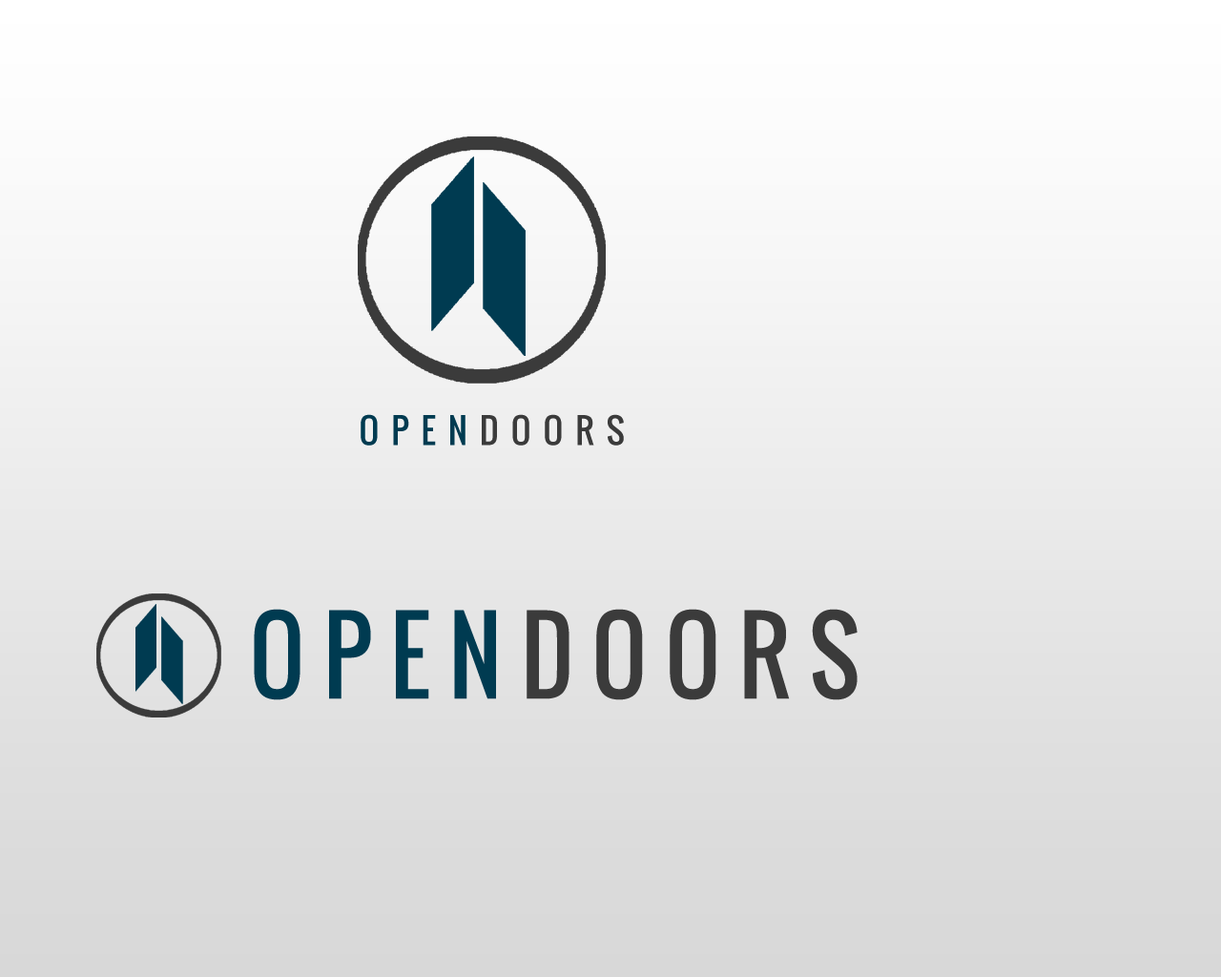
<style>
.page{position:relative;width:1221px;height:977px}
.page>*{position:absolute;margin:0}
.t1{font:34.3px "Oswald-Regular";letter-spacing:0.36em;color:#3b3b3b}
.t2{font:34.3px "Oswald-Regular";letter-spacing:0.36em;color:#003b51}
.t3{font:100.9px "Oswald-Regular";letter-spacing:0.2em;color:#3b3b3b;scale:0.94 1}
.t4{font:100.9px "Oswald-Regular";letter-spacing:0.2em;color:#003b51;scale:0.94 1}
</style>
<div class="page">
<p class="t1" style="left:361px;top:414px;width:263px;height:31px"><span class="t2">OPEN</span>DOORS</p>
<p class="t3" style="left:254px;top:609px;width:603px;height:91px"><span class="t4">OPEN</span>DOORS</p>
</div>
